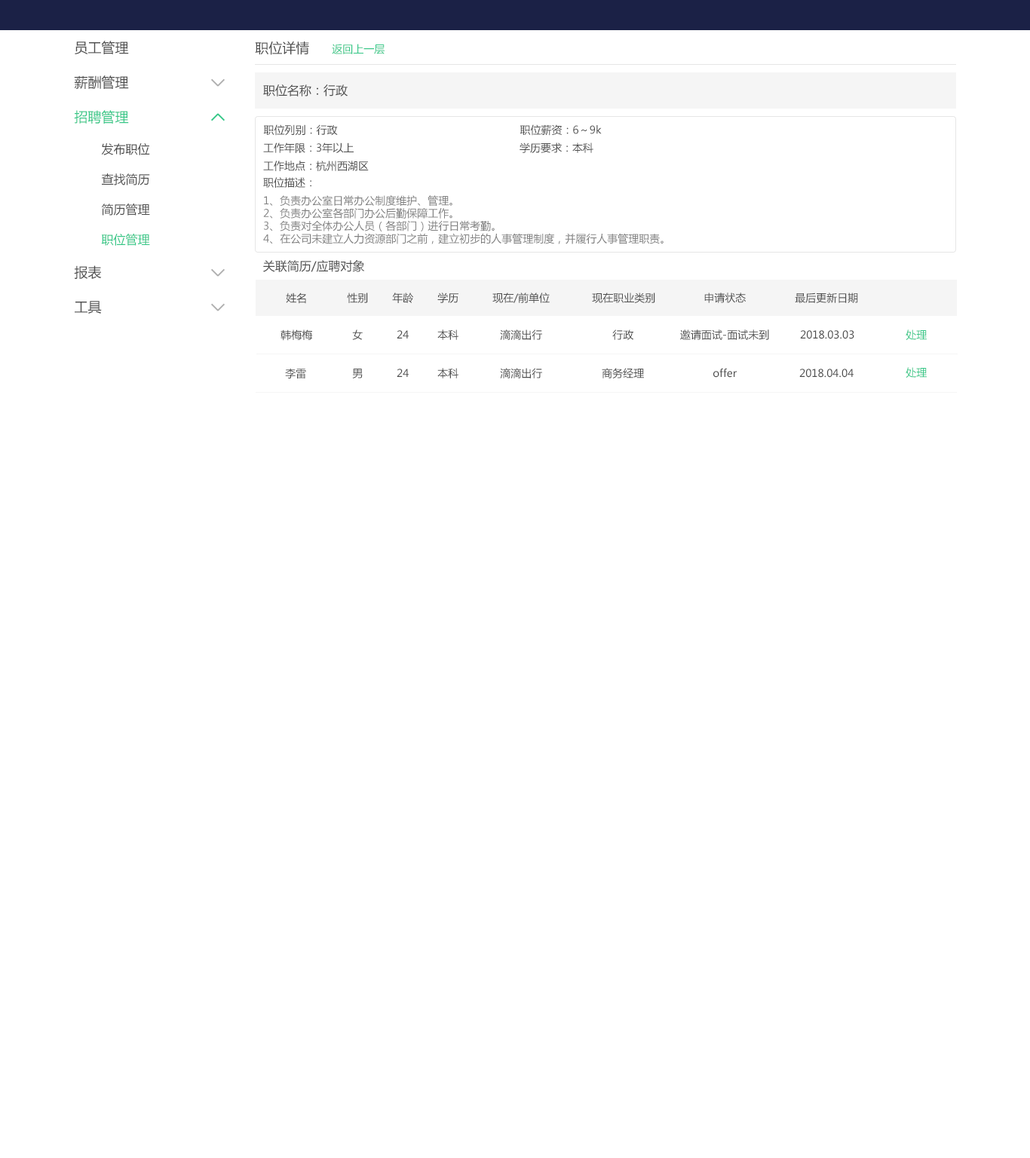
<style>
.page{position:relative;width:1030px;height:1158px;background:#ffffff}
.page>*{position:absolute;margin:0}
.t1{font:13.6px "MicrosoftYaHei";color:#4d4d4d}
.t2{font:10.6px "MicrosoftYaHei";color:#35c787}
.t3{font:12.1px "MicrosoftYaHei";color:#4d4d4d}
.t4{font:13.6px "MicrosoftYaHei";color:#35c787}
.t5{font:10.6px "MicrosoftYaHei";color:#4d4d4d}
.t6{font:10.3px "MicrosoftYaHei";color:#4d4d4d}
.t7{font:10.6px "MicrosoftYaHei";color:#808080}
.t8{font:12.1px "MicrosoftYaHei";color:#35c787}
.t9{font:10.5px "MicrosoftYaHei";color:#4d4d4d}
.t10{font:10.5px "MicrosoftYaHei";color:#35c787}
</style>
<div class="page">
<p class="t1" style="left:75px;top:41px;width:54px;height:13px">员工管理</p>
<p class="t1" style="left:255px;top:41px;width:54px;height:14px">职位详情</p>
<p class="t2" style="left:332px;top:44px;width:52px;height:10px">返回上一层</p>
<p class="t1" style="left:74px;top:75px;width:55px;height:14px">薪酬管理</p>
<p class="t3" style="left:263px;top:84px;width:85px;height:12px">职位名称：行政</p>
<p class="t4" style="left:74px;top:110px;width:55px;height:14px">招聘管理</p>
<p class="t5" style="left:263px;top:124px;width:75px;height:12px">职位列别：行政</p>
<p class="t5" style="left:519px;top:124px;width:83px;height:12px">职位薪资：6～9k</p>
<p class="t3" style="left:101px;top:143px;width:49px;height:12px">发布职位</p>
<p class="t6" style="left:263px;top:142px;width:91px;height:11px">工作年限：3年以上</p>
<p class="t6" style="left:519px;top:142px;width:74px;height:11px">学历要求：本科</p>
<p class="t5" style="left:263px;top:161px;width:106px;height:10px">工作地点：杭州西湖区</p>
<p class="t3" style="left:101px;top:173px;width:49px;height:12px">查找简历</p>
<p class="t5" style="left:263px;top:177px;width:48px;height:11px">职位描述：</p>
<p class="t7" style="left:263px;top:195px;width:400px;height:49px">1、负责办公室日常办公制度维护、管理。<br>2、负责办公室各部门办公后勤保障工作。<br>3、负责对全体办公人员（各部门）进行日常考勤。<br>4、在公司未建立人力资源部门之前，建立初步的人事管理制度，并履行人事管理职责。</p>
<p class="t3" style="left:101px;top:204px;width:49px;height:12px">简历管理</p>
<p class="t8" style="left:101px;top:234px;width:49px;height:12px">职位管理</p>
<p class="t1" style="left:74px;top:265px;width:28px;height:14px">报表</p>
<p class="t3" style="left:263px;top:260px;width:102px;height:12px">关联简历/应聘对象</p>
<p class="t5" style="left:286px;top:293px;width:20px;height:11px">姓名</p>
<p class="t9" style="left:347px;top:293px;width:21px;height:10px">性别</p>
<p class="t9" style="left:392px;top:293px;width:21px;height:10px">年龄</p>
<p class="t9" style="left:437px;top:293px;width:21px;height:10px">学历</p>
<p class="t9" style="left:492px;top:293px;width:58px;height:10px">现在/前单位</p>
<p class="t9" style="left:592px;top:293px;width:63px;height:10px">现在职业类别</p>
<p class="t9" style="left:704px;top:293px;width:42px;height:10px">申请状态</p>
<p class="t9" style="left:795px;top:293px;width:63px;height:10px">最后更新日期</p>
<p class="t1" style="left:75px;top:301px;width:27px;height:13px">工具</p>
<p class="t5" style="left:280px;top:329px;width:33px;height:12px">韩梅梅</p>
<p class="t9" style="left:352px;top:329px;width:11px;height:11px">女</p>
<p class="t9" style="left:437px;top:329px;width:21px;height:11px">本科</p>
<p class="t9" style="left:500px;top:329px;width:42px;height:11px">滴滴出行</p>
<p class="t9" style="left:612px;top:329px;width:21px;height:11px">行政</p>
<p class="t9" style="left:680px;top:329px;width:89px;height:11px">邀请面试-面试未到</p>
<p class="t10" style="left:905px;top:329px;width:22px;height:11px">处理</p>
<p class="t9" style="left:397px;top:330px;width:12px;height:8px">24</p>
<p class="t9" style="left:800px;top:330px;width:54px;height:9px">2018.03.03</p>
<p class="t9" style="left:285px;top:368px;width:21px;height:10px">李雷</p>
<p class="t9" style="left:352px;top:369px;width:11px;height:9px">男</p>
<p class="t9" style="left:397px;top:369px;width:12px;height:8px">24</p>
<p class="t9" style="left:437px;top:368px;width:21px;height:10px">本科</p>
<p class="t9" style="left:500px;top:368px;width:42px;height:10px">滴滴出行</p>
<p class="t9" style="left:602px;top:368px;width:42px;height:10px">商务经理</p>
<p class="t9" style="left:713px;top:368px;width:24px;height:10px">offer</p>
<p class="t9" style="left:799px;top:369px;width:54px;height:9px">2018.04.04</p>
<p class="t10" style="left:905px;top:367px;width:22px;height:11px">处理</p>
</div>
